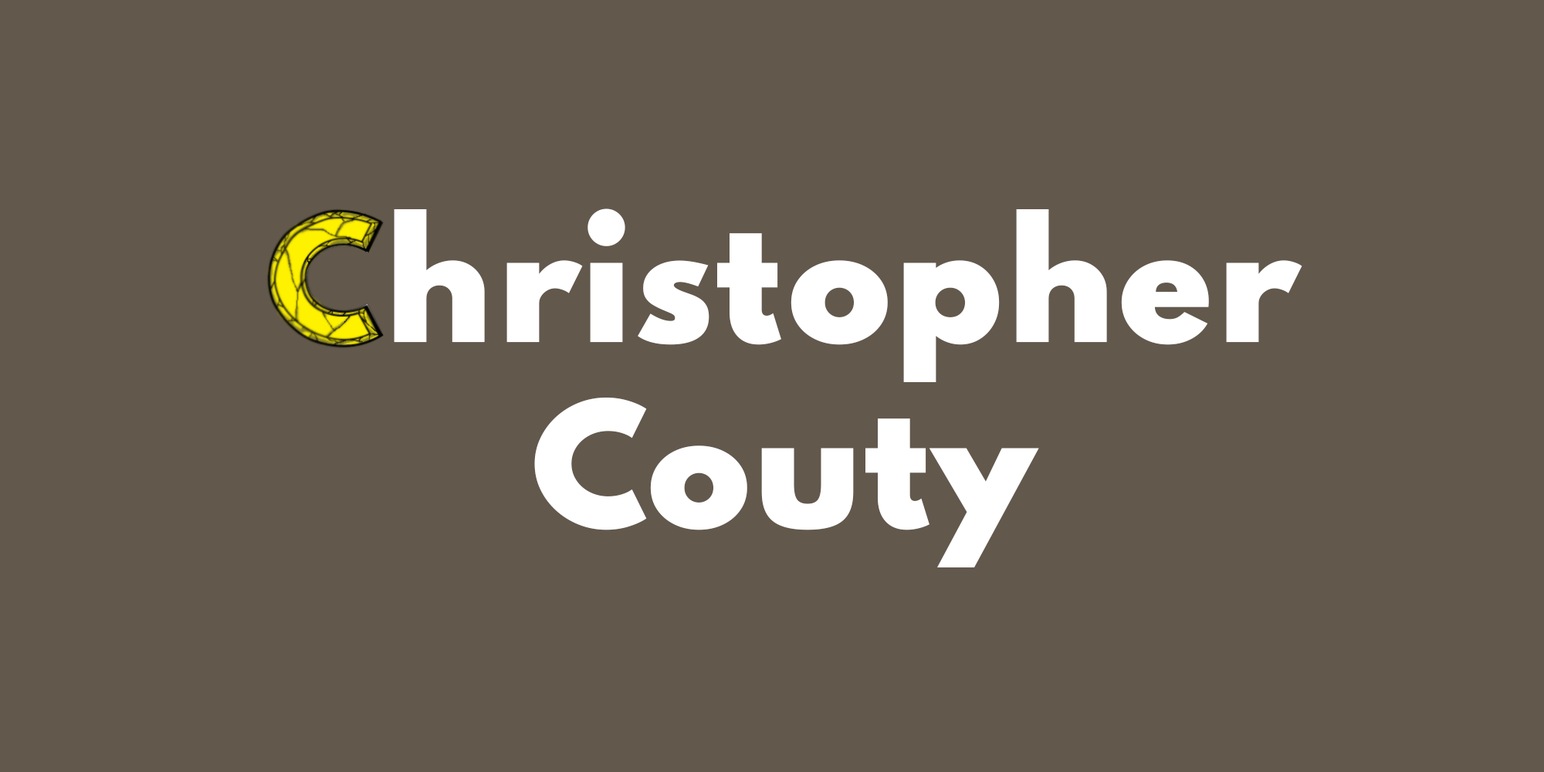
<style>
.page{position:relative;width:1544px;height:772px;background:#62584c}
.page>*{position:absolute;margin:0}
.t1{font:154.4px "Spartan-Black";color:#ffffff}
</style>
<div class="page">
<p class="t1" style="left:269px;top:208px;width:1034px;height:360px;text-align:center">Christopher<br>Couty</p>
</div>
